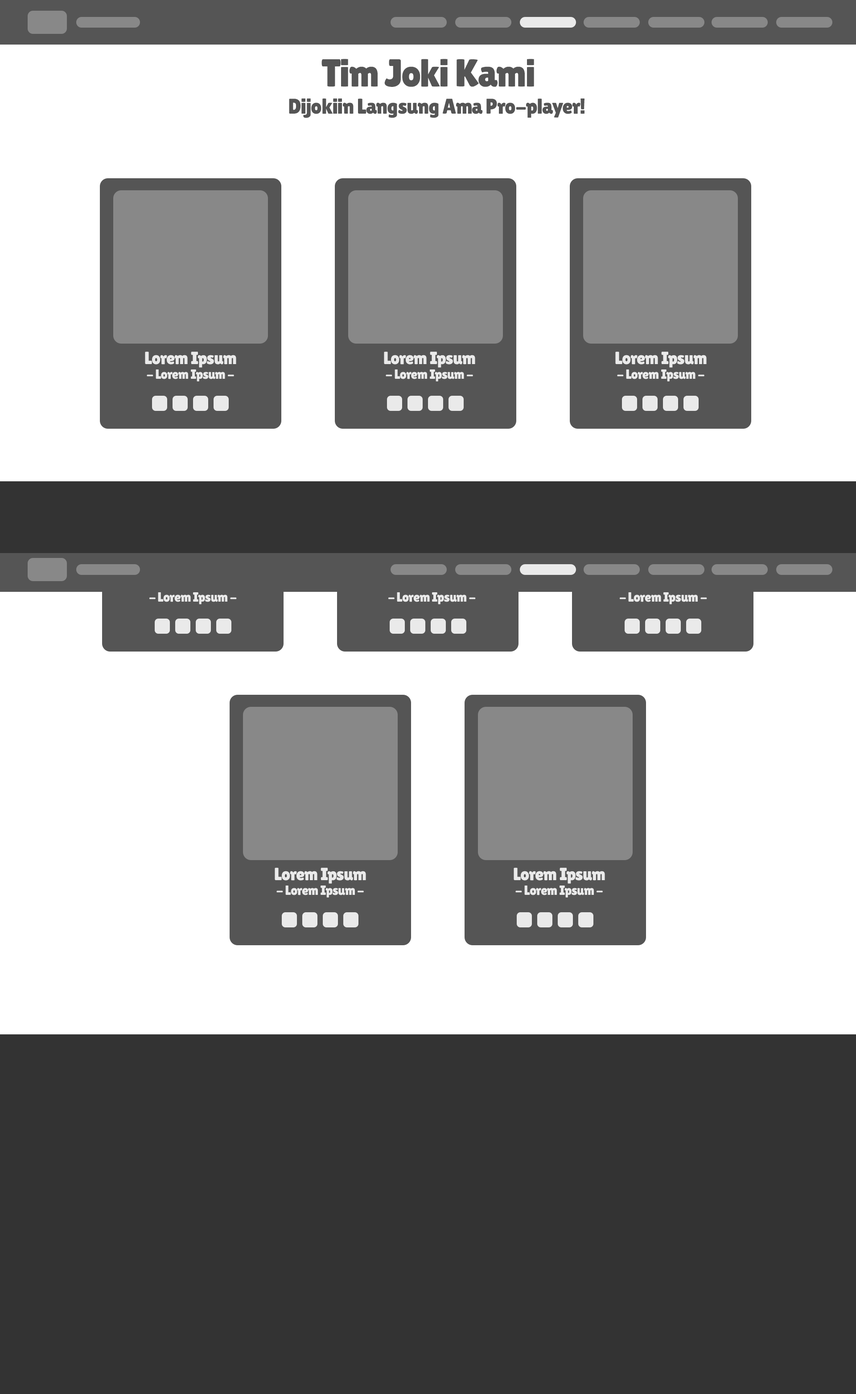
<style>
.page{position:relative;width:856px;height:1394px;background:#ffffff}
.page>*{position:absolute;margin:0}
.t1{font:38.8px "LilitaOne";letter-spacing:-0.025em;color:#555555}
.t2{font:21.4px "LilitaOne";letter-spacing:-0.025em;color:#555555}
.t3{font:17.6px "LilitaOne";letter-spacing:-0.025em;color:#eaeaea}
.t4{font:13.4px "LilitaOne";letter-spacing:-0.025em;color:#eaeaea}
</style>
<div class="page">
<p class="t1" style="left:321px;top:59px;width:213px;height:28px">Tim Joki Kami</p>
<p class="t2" style="left:289px;top:98px;width:295px;height:20px">Dijokiin Langsung Ama Pro-player!</p>
<p class="t3" style="left:145px;top:352px;width:91px;height:16px">Lorem Ipsum</p>
<p class="t3" style="left:384px;top:352px;width:91px;height:16px">Lorem Ipsum</p>
<p class="t3" style="left:615px;top:352px;width:91px;height:16px">Lorem Ipsum</p>
<p class="t4" style="left:147px;top:369px;width:87px;height:12px">- Lorem Ipsum -</p>
<p class="t4" style="left:385px;top:369px;width:88px;height:12px">- Lorem Ipsum -</p>
<p class="t4" style="left:617px;top:369px;width:87px;height:12px">- Lorem Ipsum -</p>
<p class="t4" style="left:149px;top:592px;width:88px;height:12px">- Lorem Ipsum -</p>
<p class="t4" style="left:388px;top:592px;width:87px;height:12px">- Lorem Ipsum -</p>
<p class="t4" style="left:619px;top:592px;width:88px;height:12px">- Lorem Ipsum -</p>
<p class="t3" style="left:274px;top:868px;width:92px;height:16px">Lorem Ipsum</p>
<p class="t3" style="left:513px;top:868px;width:92px;height:16px">Lorem Ipsum</p>
<p class="t4" style="left:276px;top:885px;width:88px;height:12px">- Lorem Ipsum -</p>
<p class="t4" style="left:515px;top:885px;width:87px;height:12px">- Lorem Ipsum -</p>
</div>
